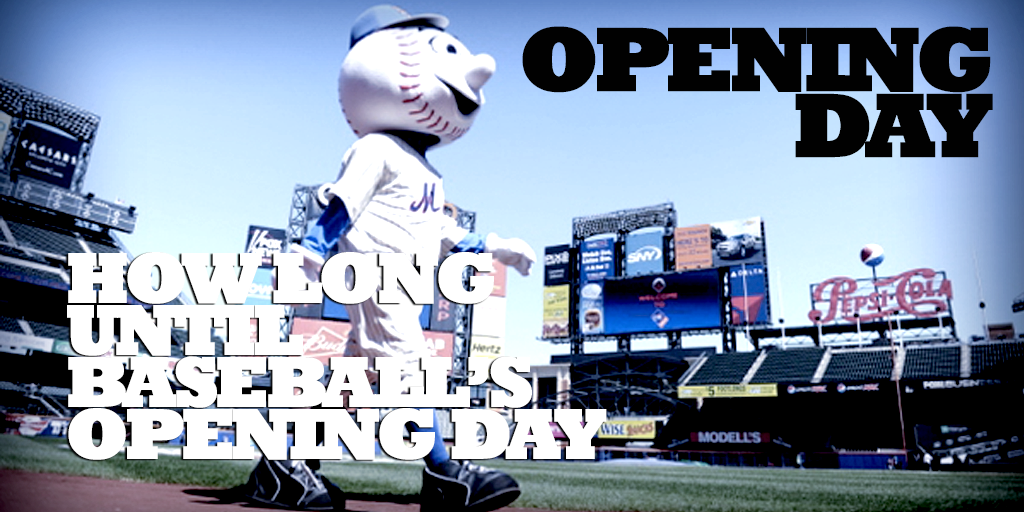
<style>
.page{position:relative;width:1024px;height:512px}
.page>*{position:absolute;margin:0}
.t1{font:91.8px/66.3px "Rockwell-ExtraBold";letter-spacing:-0.075em;color:#010101;font-weight:bold}
.t2{font:72px/52px "Rockwell-ExtraBold";letter-spacing:-0.075em;color:#ffffff;font-weight:bold}
</style>
<div class="page">
<p class="t1" style="left:522px;top:26px;width:471px;height:132px;text-align:right">OPENING<br>DAY</p>
<p class="t2" style="left:67px;top:252px;width:540px;height:208px">HOW LONG UNTIL BASEBALL’S OPENING DAY</p>
</div>
